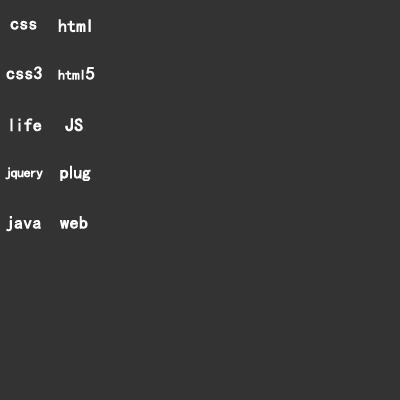
<style>
.page{position:relative;width:400px;height:400px;background:#333333}
.page>*{position:absolute;margin:0}
.t1{font:18px "SimHei";color:#ffffff;font-weight:bold}
.t2{font:14px "SimHei";color:#ffffff;font-weight:bold}
</style>
<div class="page">
<p class="t1" style="left:10px;top:20px;width:27px;height:10px">css</p>
<p class="t1" style="left:58px;top:19px;width:33px;height:14px">html</p>
<p class="t1" style="left:6px;top:66px;width:36px;height:14px">css3</p>
<p class="t2" style="left:58px;top:67px;width:37px;height:13px">html<span class="t1">5</span></p>
<p class="t1" style="left:10px;top:118px;width:32px;height:14px">life</p>
<p class="t1" style="left:65px;top:118px;width:18px;height:14px">JS</p>
<p class="t2" style="left:5px;top:167px;width:38px;height:13px">jquery</p>
<p class="t1" style="left:60px;top:165px;width:31px;height:16px">plug</p>
<p class="t1" style="left:6px;top:216px;width:35px;height:16px">java</p>
<p class="t1" style="left:60px;top:216px;width:28px;height:13px">web</p>
</div>
